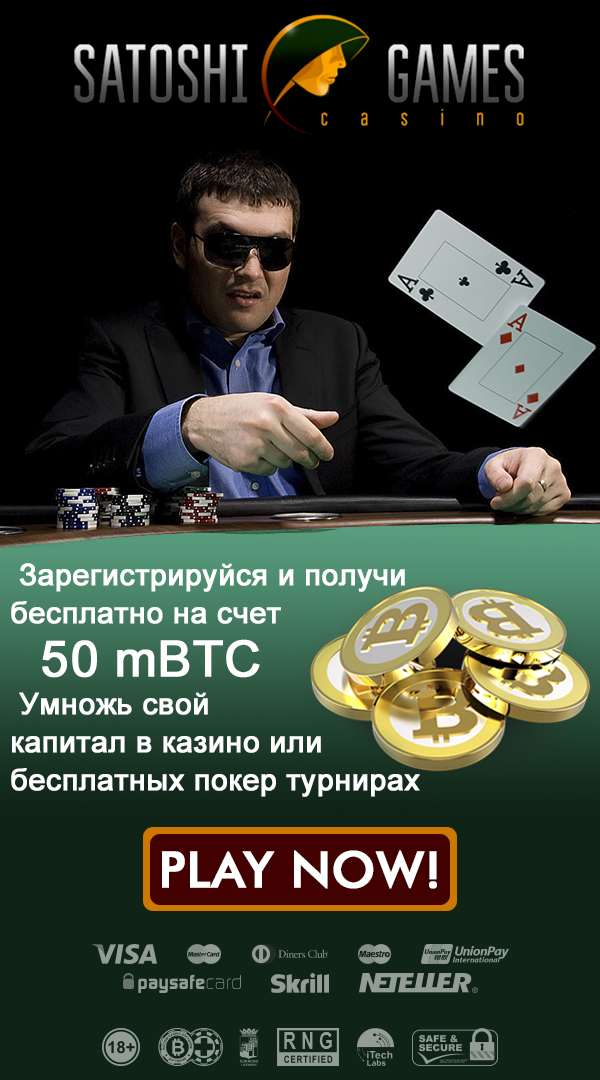
<style>
.page{position:relative;width:600px;height:1080px;background:#000000}
.page>*{position:absolute;margin:0}
.t1{font:30px/28px "ArialMT";color:#ffffff;font-weight:bold}
.t2{font:30px/28px "EnigmaticUnicode";color:#ffffff;font-weight:bold}
.t3{font:50px/28px "ArialMT";color:#ffffff;font-weight:bold}
.t4{font:50px "FuturaBT-Medium";color:#ffffff;font-weight:bold}
</style>
<div class="page">
<p class="t1" style="left:11px;top:563px;width:409px;height:234px"><span class="t2"> </span>Зарегистрируйся и получи<br>бесплатно на счет<br><span class="t3">  50 mBTC<br></span> Умножь свой<br>капитал в казино или<br>бесплатных покер турнирах</p>
<p class="t4" style="left:162px;top:850px;width:275px;height:39px">PLAY NOW!</p>
</div>
